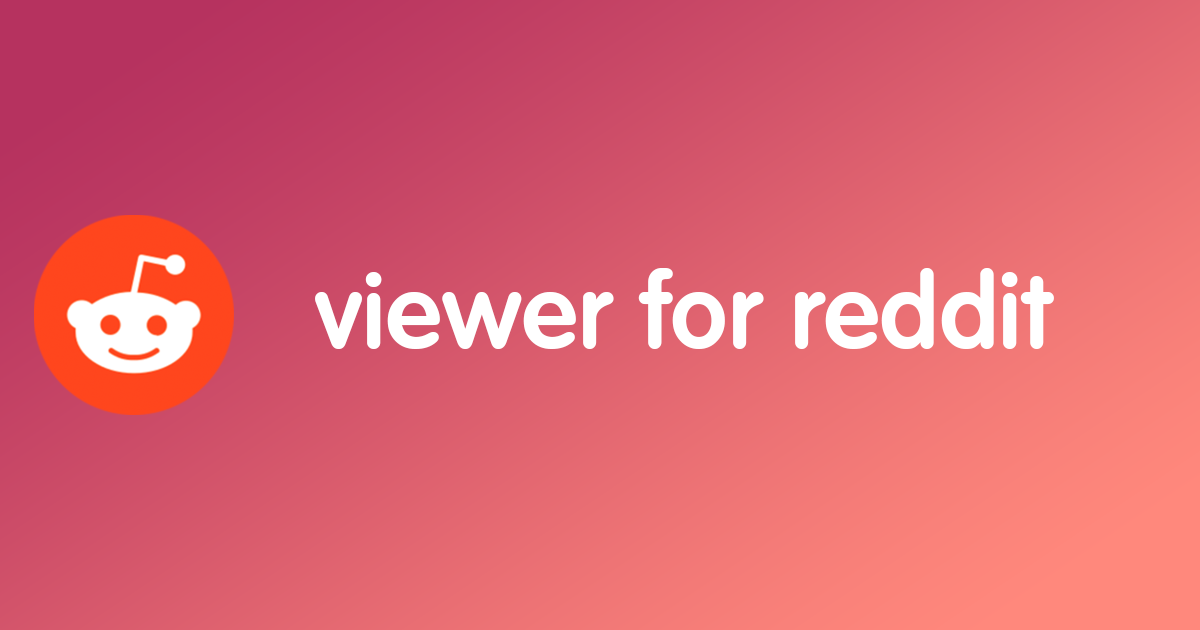
<style>
.page{position:relative;width:1200px;height:630px}
.page>*{position:absolute;margin:0}
.t1{font:102.5px "Volkswagen-Serial-Bold";color:#ffffff}
</style>
<div class="page">
<p class="t1" style="left:315px;top:268px;width:739px;height:81px">viewer for reddit</p>
</div>
